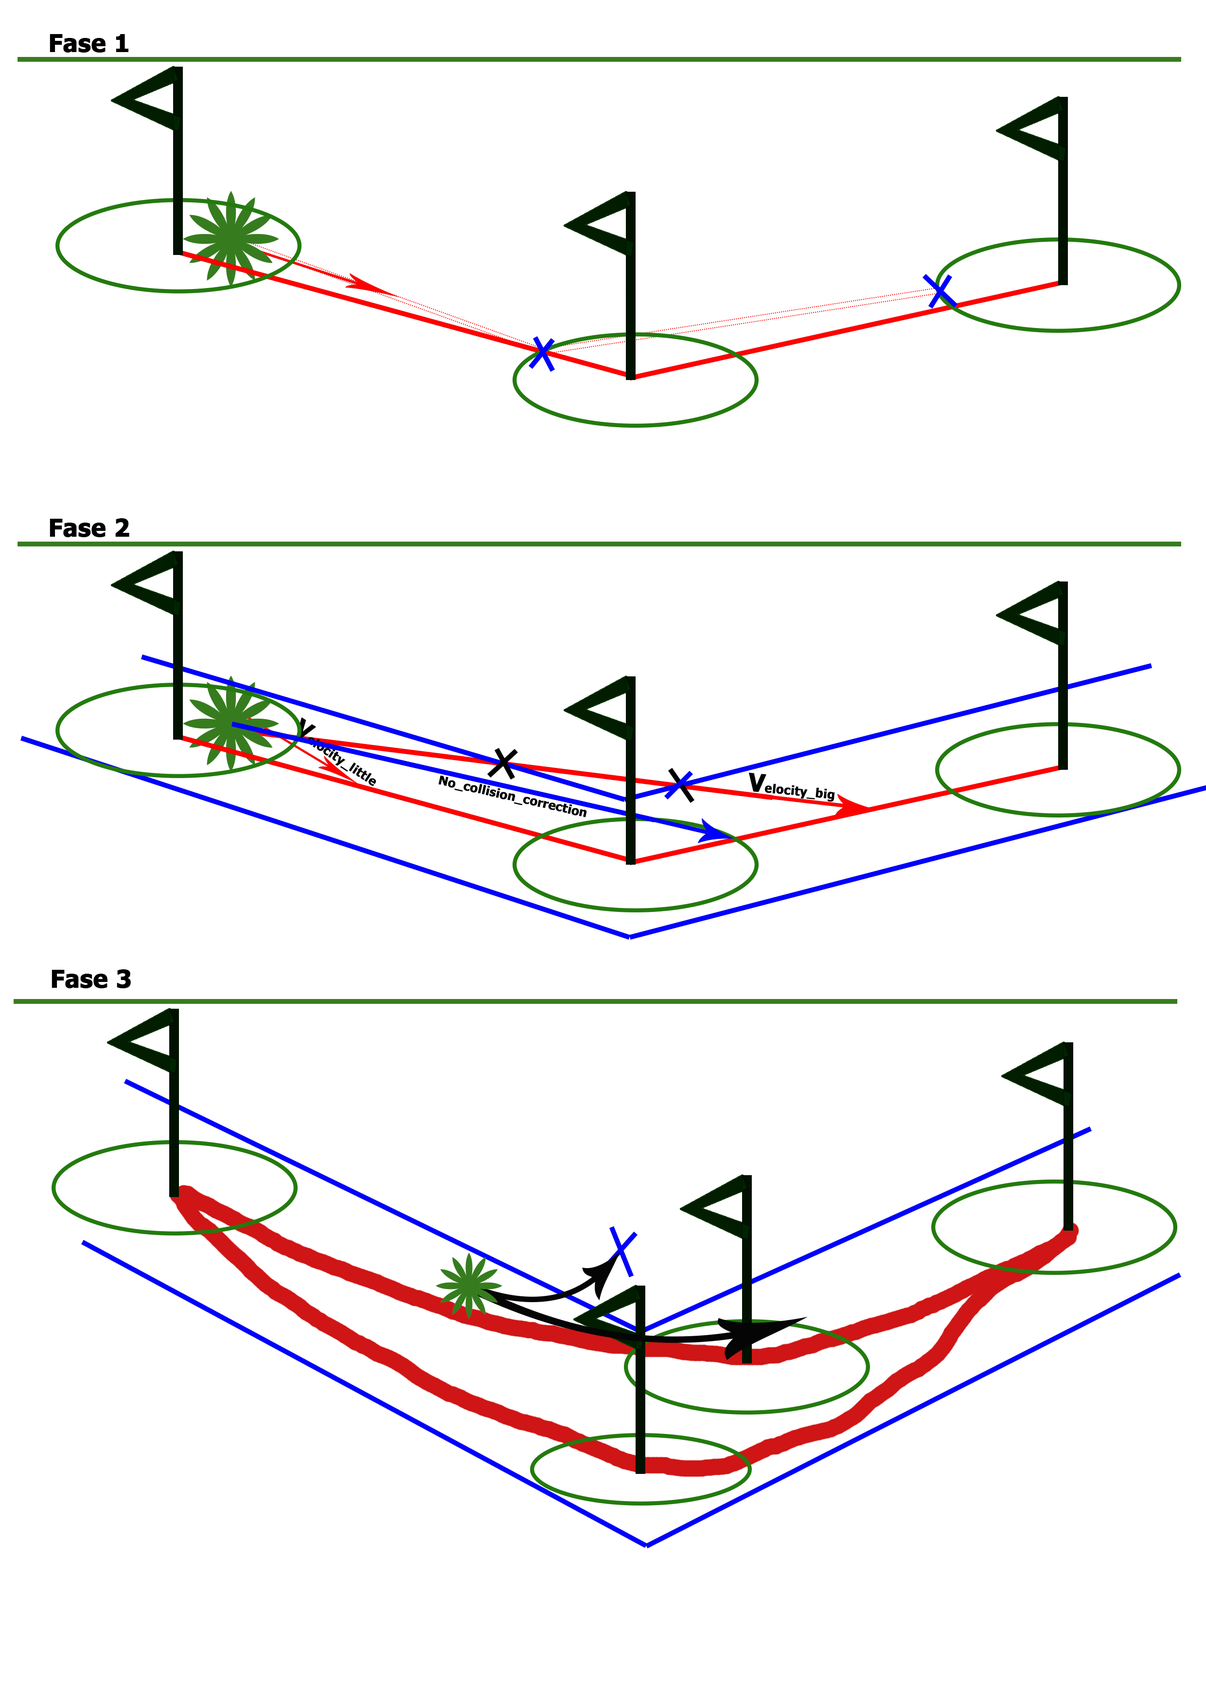
<style>
.page{position:relative;width:1206px;height:1707px;background:#ffffff}
.page>*{position:absolute;margin:0}
.t1{font:5.8px "Tahoma-Bold";color:#000000;font-weight:bold}
.t2{font:12.2px "Tahoma-Bold";color:#000000;font-weight:bold}
.t3{font:12.4px "Tahoma-Bold";color:#000000;font-weight:bold}
.t4{font:6px "Tahoma-Bold";color:#000000;font-weight:bold}
</style>
<div class="page">
<p class="t1" style="left:50px;top:34px;width:79px;height:19px;text-align:center">Fase 1</p>
<p class="t1" style="left:50px;top:518px;width:79px;height:19px;text-align:center">Fase 2</p>
<p class="t2" style="left:297px;top:717px;width:79px;height:69px;rotate:34deg"><span class="t1">V</span>elocity_little</p>
<p class="t3" style="left:749px;top:773px;width:86px;height:29px;rotate:6deg"><span class="t4">V</span>elocity_big</p>
<p class="t2" style="left:438px;top:775px;width:149px;height:42px;rotate:13deg">No_collision_correction</p>
<p class="t1" style="left:52px;top:969px;width:79px;height:19px;text-align:center">Fase 3</p>
</div>
